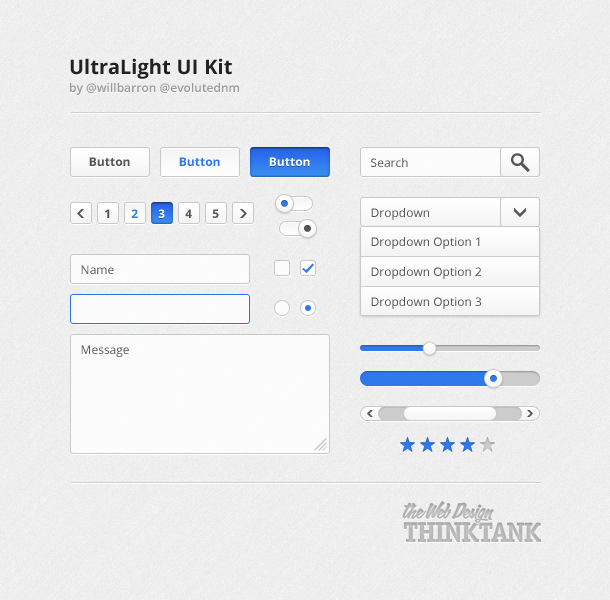
<style>
.page{position:relative;width:610px;height:600px}
.page>*{position:absolute;margin:0}
.t1{font:12px/18px "OpenSans-Semibold";color:#999999}
.t2{font:20px/18px "OpenSans-Bold";color:#222222}
.t3{font:12px "OpenSans-Bold";color:#555555}
.t4{font:12px "OpenSans-Bold";color:#3079ed}
.t5{font:12px "OpenSans-Bold";color:#ffffff}
.t6{font:12px "OpenSans";color:#555555}
.t7{font:12px/30px "OpenSans";color:#555555}
</style>
<div class="page">
<p class="t1" style="left:70px;top:58px;width:169px;height:37px"><span class="t2">UltraLight UI Kit<br></span>by @willbarron @evolutednm</p>
<p class="t3" style="left:89px;top:157px;width:41px;height:9px">Button</p>
<p class="t4" style="left:179px;top:157px;width:41px;height:9px">Button</p>
<p class="t5" style="left:269px;top:157px;width:41px;height:9px">Button</p>
<p class="t6" style="left:371px;top:158px;width:37px;height:9px">Search</p>
<p class="t3" style="left:105px;top:209px;width:5px;height:9px">1</p>
<p class="t4" style="left:131px;top:209px;width:7px;height:9px">2</p>
<p class="t5" style="left:158px;top:209px;width:7px;height:9px">3</p>
<p class="t3" style="left:185px;top:209px;width:7px;height:9px">4</p>
<p class="t3" style="left:212px;top:209px;width:7px;height:9px">5</p>
<p class="t6" style="left:371px;top:208px;width:58px;height:12px">Dropdown</p>
<p class="t7" style="left:371px;top:237px;width:110px;height:72px">Dropdown Option 1<br>Dropdown Option 2<br>Dropdown Option 3</p>
<p class="t6" style="left:81px;top:265px;width:33px;height:9px">Name</p>
<p class="t6" style="left:81px;top:345px;width:48px;height:12px">Message</p>
</div>
